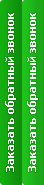
<style>
.page{position:relative;width:44px;height:185px}
.page>*{position:absolute;margin:0}
.t1{font:11px "Tahoma-Bold";color:#ffffff}
</style>
<div class="page">
<p class="t1" style="left:5px;top:13px;width:11px;height:159px;rotate:-90deg">Заказать обратный звонок</p>
<p class="t1" style="left:27px;top:13px;width:11px;height:159px;rotate:-90deg">Заказать обратный звонок</p>
</div>
